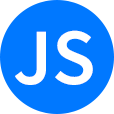
<style>
.page{position:relative;width:114px;height:114px;background:#0078ff}
.page>*{position:absolute;margin:0}
.t1{font:80px "SourceSansPro-SemiBold";color:#ffffff}
</style>
<div class="page">
<p class="t1" style="left:15px;top:30px;width:78px;height:55px">JS</p>
</div>
